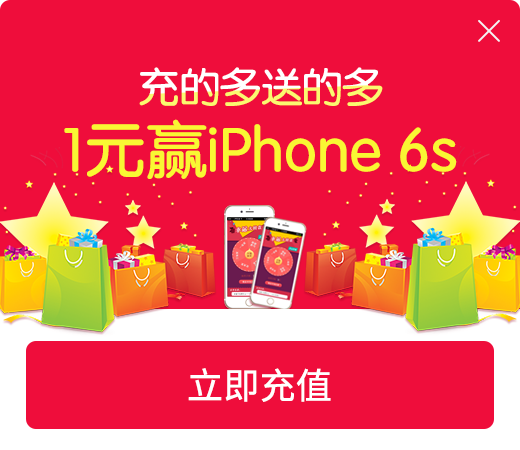
<style>
.page{position:relative;width:520px;height:450px;background:#ef0d3b}
.page>*{position:absolute;margin:0}
.t1{font:40.5px "JZunYuan";letter-spacing:-0.02em;font-weight:bold}
.t2{font:60.7px "JZunYuan";letter-spacing:-0.02em;color:#f9f733;font-weight:bold}
.t3{font:36px "SourceHanSansCN-Regular";letter-spacing:-0.02em;color:#ffffff;font-weight:bold}
</style>
<div class="page">
<p class="t1" style="left:139px;top:67px;width:244px;height:39px">充的多送的多</p>
<p class="t2" style="left:64px;top:119px;width:393px;height:60px">1元赢iPhone 6s</p>
<p class="t3" style="left:188px;top:368px;width:143px;height:34px">立即充值</p>
</div>
